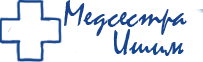
<style>
.page{position:relative;width:203px;height:62px;background:#ffffff}
.page>*{position:absolute;margin:0}
.t1{font:36px "Mistral";color:#19438c}
.t2{font:36px "Mistral";color:#16468d}
</style>
<div class="page">
<p class="t1" style="left:64px;top:0px;width:123px;height:36px">Медсестра</p>
<p class="t2" style="left:113px;top:29px;width:71px;height:27px">Ишим</p>
</div>
